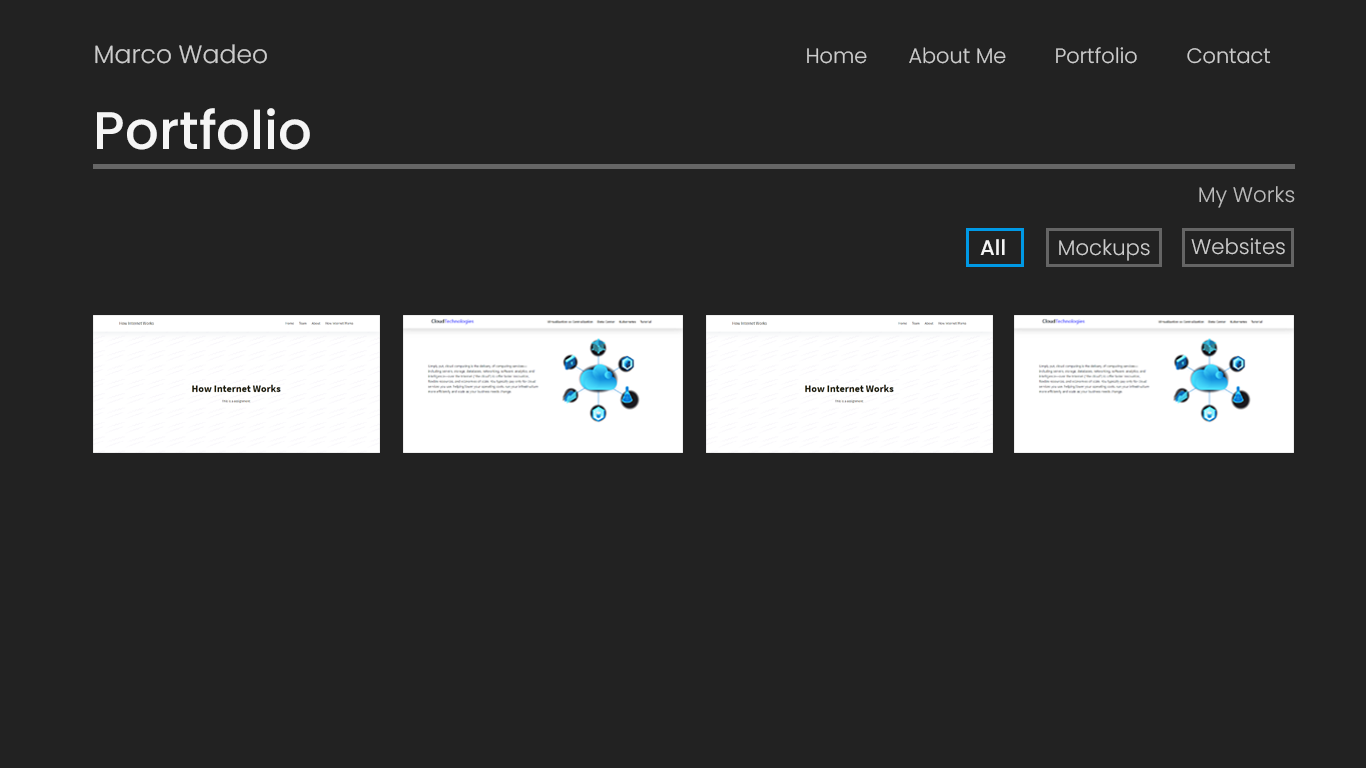
<style>
.page{position:relative;width:1366px;height:768px;background:#222222}
.page>*{position:absolute;margin:0}
.t1{font:25px "Poppins-Light";color:#cccccc}
.t2{font:20.8px "Poppins-Light";color:#cccccc}
.t3{font:52.9px "Poppins-Medium";color:#f5f5f5}
.t4{font:21.2px "Poppins-Light";color:#bbbbbb}
.t5{font:21.2px "Poppins-Medium";color:#f5f5f5}
.t6{font:21.2px "Poppins-Light";color:#cccccc}
</style>
<div class="page">
<p class="t1" style="left:95px;top:44px;width:172px;height:20px">Marco Wadeo</p>
<p class="t2" style="left:807px;top:48px;width:60px;height:16px">Home</p>
<p class="t2" style="left:909px;top:47px;width:97px;height:17px">About Me</p>
<p class="t2" style="left:1056px;top:47px;width:81px;height:17px">Portfolio</p>
<p class="t2" style="left:1187px;top:48px;width:84px;height:16px">Contact</p>
<p class="t3" style="left:97px;top:108px;width:213px;height:42px">Portfolio</p>
<p class="t4" style="left:1199px;top:186px;width:96px;height:22px">My Works</p>
<p class="t5" style="left:980px;top:239px;width:25px;height:16px">All</p>
<p class="t6" style="left:1059px;top:239px;width:91px;height:22px">Mockups</p>
<p class="t6" style="left:1191px;top:238px;width:94px;height:17px">Websites</p>
</div>
